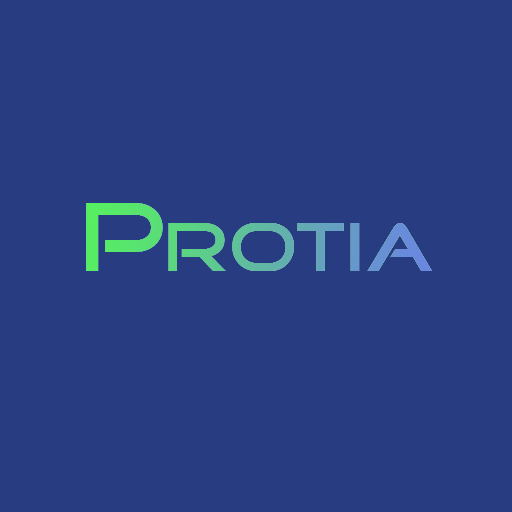
<style>
.page{position:relative;width:512px;height:512px;background:#283c81}
.page>*{position:absolute;margin:0}
.t1{font:100px "GoodTimes";font-variant:small-caps}
</style>
<div class="page">
<p class="t1" style="left:86px;top:203px;width:346px;height:68px">Protia</p>
</div>
